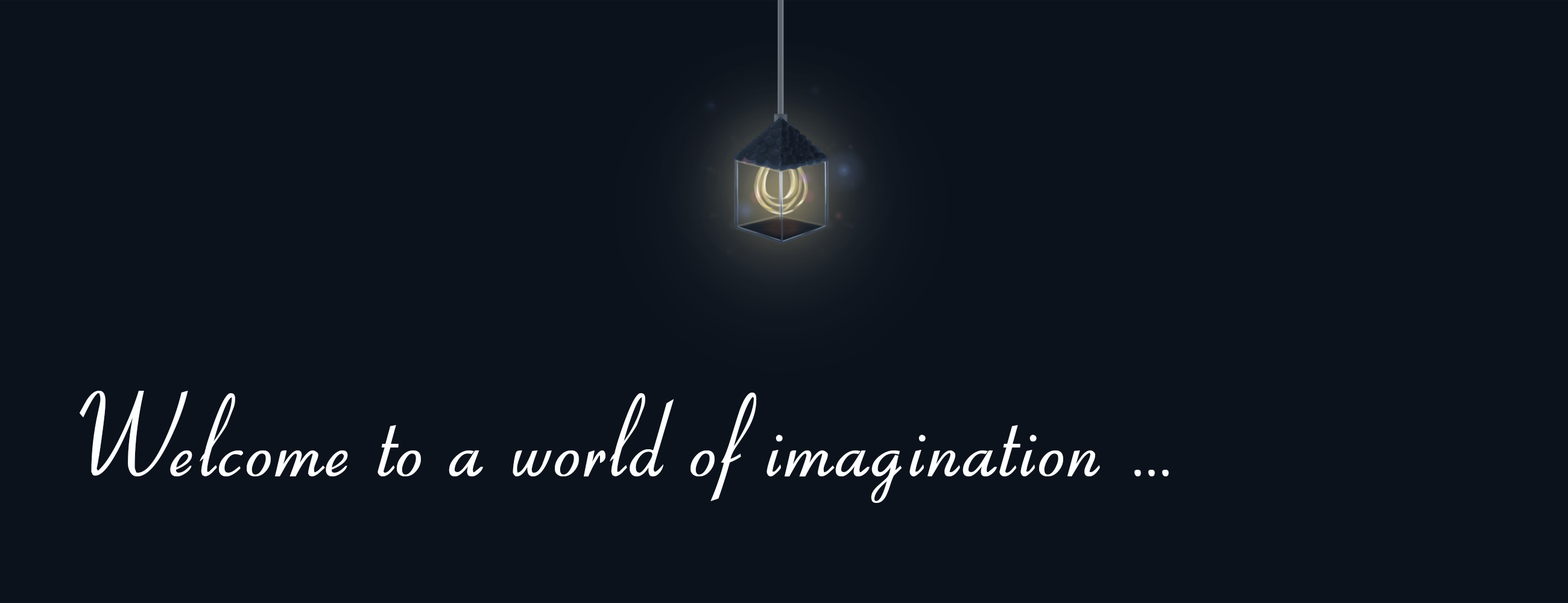
<style>
.page{position:relative;width:1568px;height:603px;background:#0b121c}
.page>*{position:absolute;margin:0}
.t1{font:120.6px "Aspire-DemiBold";color:#fdfeff}
</style>
<div class="page">
<p class="t1" style="left:79px;top:391px;width:1090px;height:112px">Welcome to a world of imagination ...</p>
</div>
